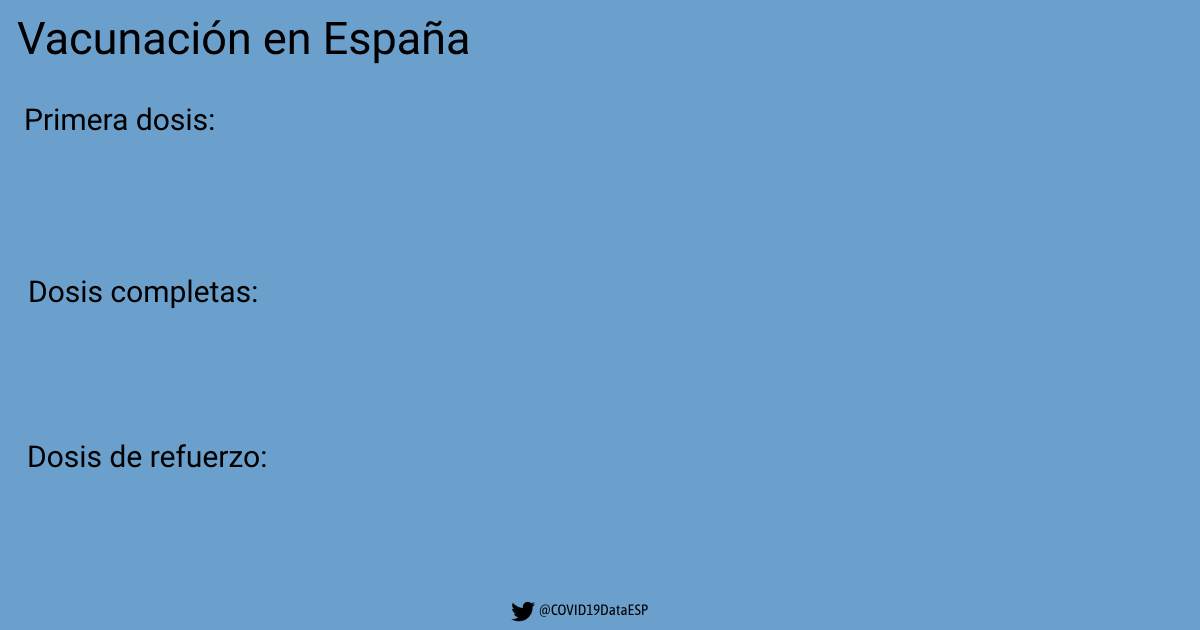
<style>
.page{position:relative;width:1200px;height:630px;background:#6b9fcc}
.page>*{position:absolute;margin:0}
.t1{font:45px "Roboto-Regular";color:#000000}
.t2{font:30px "Roboto-Regular";color:#000000}
</style>
<div class="page">
<p class="t1" style="left:17px;top:20px;width:452px;height:44px">Vacunación en España</p>
<p class="t2" style="left:26px;top:107px;width:188px;height:24px">Primera dosis:</p>
<p class="t2" style="left:30px;top:279px;width:227px;height:30px">Dosis completas:</p>
<p class="t2" style="left:29px;top:444px;width:237px;height:24px">Dosis de refuerzo:</p>
</div>
